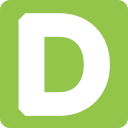
<style>
.page{position:relative;width:128px;height:128px;background:#93c54b}
.page>*{position:absolute;margin:0}
.t1{font:125px "Lato-Regular";color:#ffffff;font-weight:bold}
</style>
<div class="page">
<p class="t1" style="left:18px;top:13px;width:92px;height:103px">D</p>
</div>
